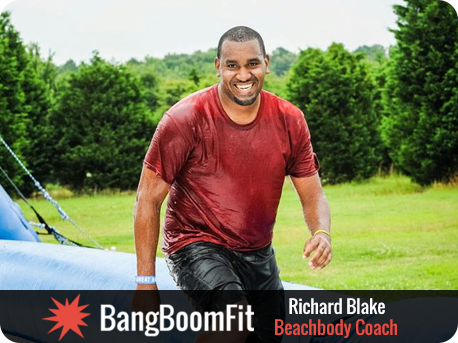
<style>
.page{position:relative;width:458px;height:343px}
.page>*{position:absolute;margin:0}
.t1{font:18px "Oswald-Regular";color:#ffffff}
.t2{font:18px "Oswald-Regular";color:#e84c40}
</style>
<div class="page">
<p class="t1" style="left:289px;top:298px;width:96px;height:17px">Richard Blake</p>
<p class="t2" style="left:275px;top:319px;width:122px;height:19px">Beachbody Coach</p>
</div>
